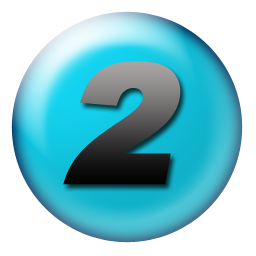
<style>
.page{position:relative;width:256px;height:256px;background:#ffffff}
.page>*{position:absolute;margin:0}
.t1{font:162.7px "Arial-Black";font-weight:bold;font-style:italic}
</style>
<div class="page">
<p class="t1" style="left:63px;top:61px;width:118px;height:124px">2</p>
</div>
